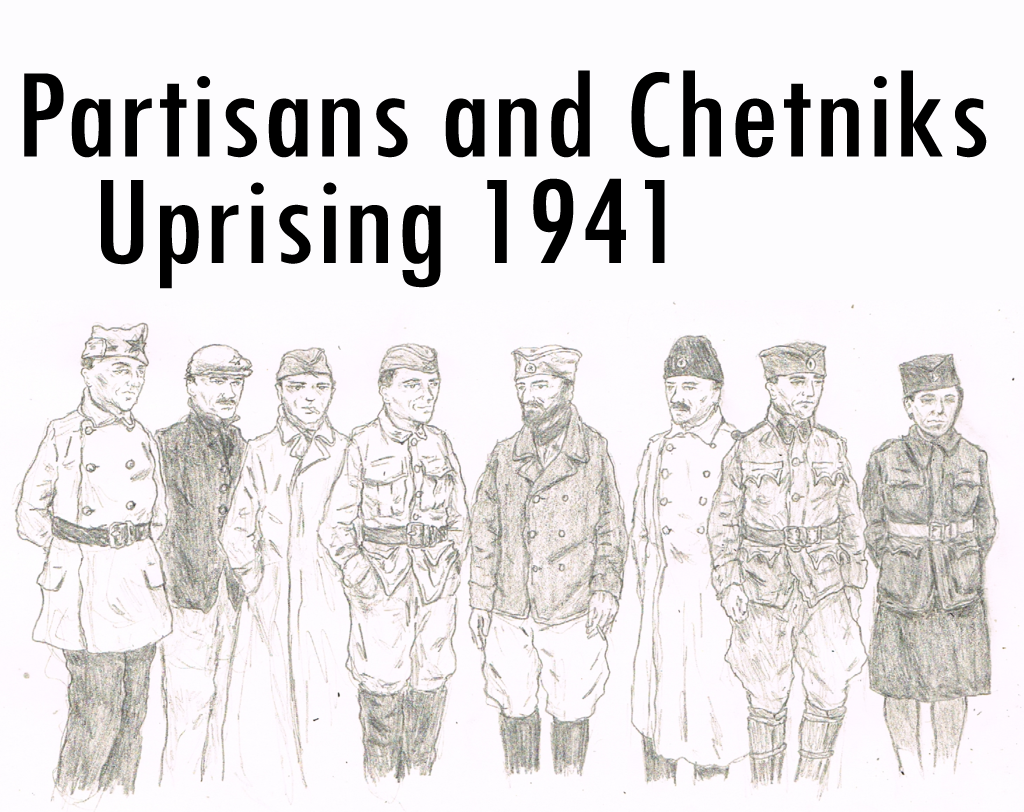
<style>
.page{position:relative;width:1024px;height:812px;background:#fdfcfe}
.page>*{position:absolute;margin:0}
.t1{font:133.3px "TwCenMT-Condensed";color:#000000;scale:1.08 1}
</style>
<div class="page">
<p class="t1" style="left:24px;top:70px;width:963px;height:88px">Partisans and Chetniks</p>
<p class="t1" style="left:101px;top:178px;width:564px;height:111px">Uprising 1941</p>
</div>
